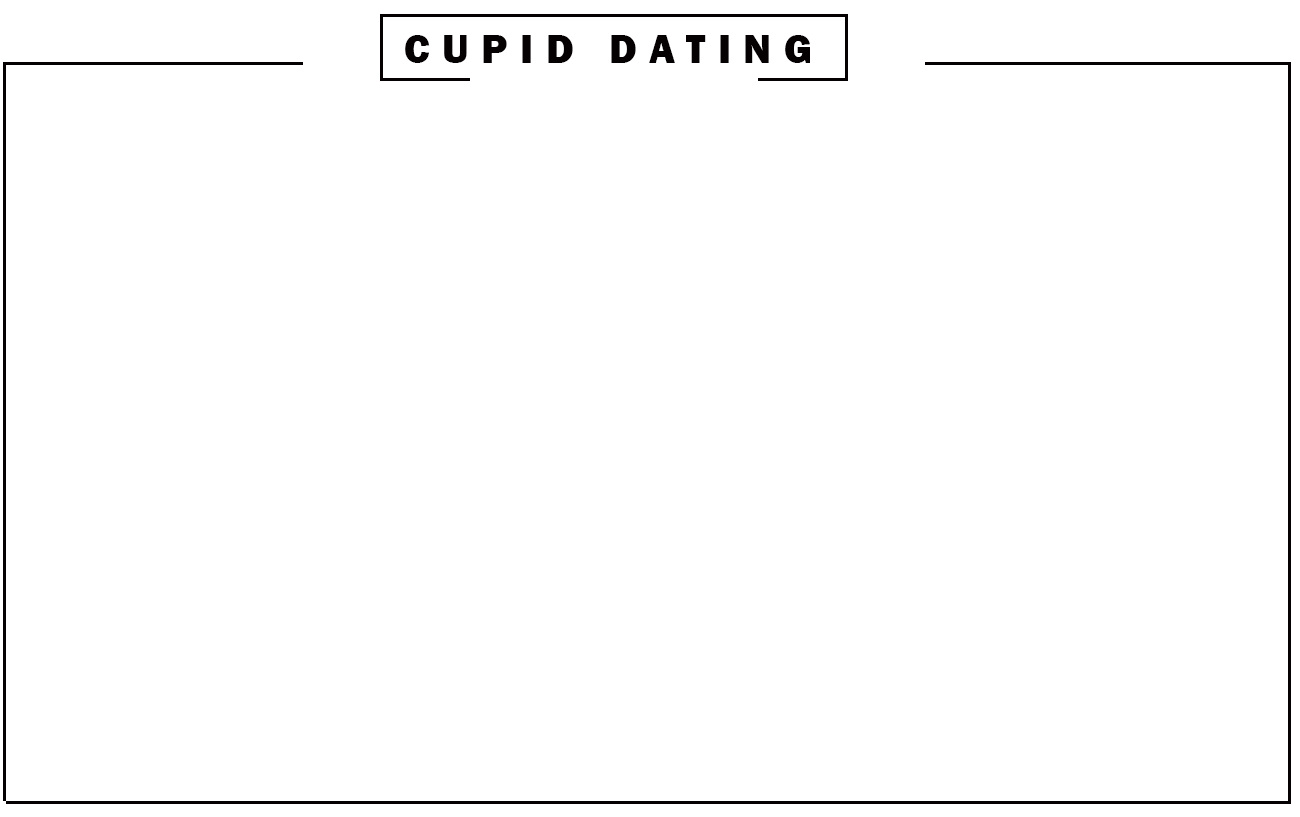
<style>
.page{position:relative;width:1300px;height:817px;background:#ffffff}
.page>*{position:absolute;margin:0}
.t1{font:41.3px "FranklinGothic-Heavy";letter-spacing:0.3em;color:#050002}
</style>
<div class="page">
<p class="t1" style="left:405px;top:35px;width:405px;height:28px">CUPID DATING</p>
</div>
